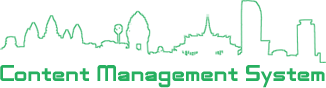
<style>
.page{position:relative;width:326px;height:88px;background:#ffffff}
.page>*{position:absolute;margin:0}
.t1{font:23px "AdventureSubtitlesNormal";color:#26af5f}
</style>
<div class="page">
<p class="t1" style="left:0px;top:65px;width:325px;height:23px">Content Management System</p>
</div>
